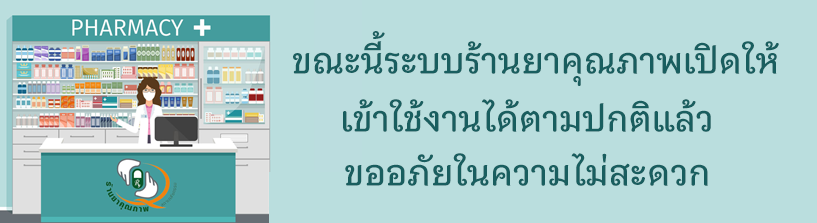
<style>
.page{position:relative;width:817px;height:223px;background:#badede}
.page>*{position:absolute;margin:0}
.t1{font:36px "ChulabhornLikitDisplay-Medium";color:#195e5f}
</style>
<div class="page">
<p class="t1" style="left:293px;top:31px;width:486px;height:55px">ขณะนี้ระบบร้านยาคุณภาพเปิดให้</p>
<p class="t1" style="left:343px;top:99px;width:368px;height:33px">เข้าใช้งานได้ตามปกติแล้ว</p>
<p class="t1" style="left:345px;top:153px;width:363px;height:33px">ขออภัยในความไม่สะดวก</p>
</div>
